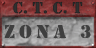
<style>
.page{position:relative;width:96px;height:48px}
.page>*{position:absolute;margin:0}
.t1{font:16.7px "Army";color:#303030;text-transform:uppercase}
.t2{font:19px "Army";letter-spacing:0.22em;color:#3f3f3f;text-transform:uppercase;scale:1.04 1}
</style>
<div class="page">
<p class="t1" style="left:13px;top:1px;width:70px;height:13px">c. t. c. t</p>
<p class="t2" style="left:4px;top:24px;width:87px;height:15px">zona 3</p>
</div>
